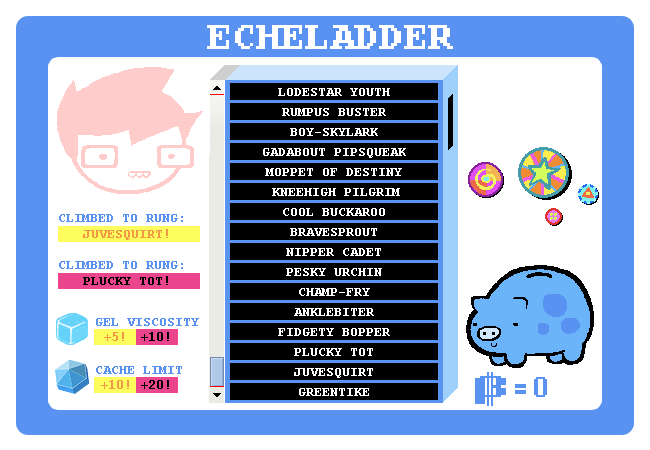
<style>
.page{position:relative;width:650px;height:450px;background:#ffffff}
.page>*{position:absolute;margin:0}
.t1{font:14px "CourierNewPS-BoldMT";color:#ffffff}
.t2{font:14px "CourierNewPS-BoldMT";color:#5992f0}
.t3{font:14px "CourierNewPS-BoldMT";color:#f19846}
.t4{font:14px "CourierNewPS-BoldMT";color:#000000}
</style>
<div class="page">
<p class="t1" style="left:278px;top:88px;width:112px;height:8px">LODESTAR YOUTH</p>
<p class="t1" style="left:282px;top:108px;width:104px;height:8px">RUMPUS BUSTER</p>
<p class="t1" style="left:290px;top:128px;width:88px;height:8px">BOY-SKYLARK</p>
<p class="t1" style="left:263px;top:148px;width:143px;height:10px">GADABOUT PIPSQUEAK</p>
<p class="t1" style="left:265px;top:168px;width:137px;height:8px">MOPPET OF DESTINY</p>
<p class="t1" style="left:272px;top:188px;width:128px;height:8px">KNEEHIGH PILGRIM</p>
<p class="t1" style="left:283px;top:208px;width:102px;height:8px">COOL BUCKAROO</p>
<p class="t2" style="left:59px;top:214px;width:124px;height:8px">CLIMBED TO RUNG:</p>
<p class="t3" style="left:83px;top:229px;width:85px;height:11px">JUVESQUIRT!</p>
<p class="t1" style="left:290px;top:228px;width:87px;height:8px">BRAVESPROUT</p>
<p class="t1" style="left:286px;top:248px;width:95px;height:8px">NIPPER CADET</p>
<p class="t2" style="left:59px;top:261px;width:124px;height:8px">CLIMBED TO RUNG:</p>
<p class="t1" style="left:286px;top:268px;width:96px;height:8px">PESKY URCHIN</p>
<p class="t4" style="left:83px;top:276px;width:85px;height:9px">PLUCKY TOT!</p>
<p class="t1" style="left:299px;top:288px;width:71px;height:8px">CHAMP-FRY</p>
<p class="t2" style="left:96px;top:318px;width:103px;height:8px">GEL VISCOSITY</p>
<p class="t1" style="left:294px;top:308px;width:80px;height:8px">ANKLEBITER</p>
<p class="t1" style="left:278px;top:328px;width:112px;height:8px">FIDGETY BOPPER</p>
<p class="t3" style="left:104px;top:332px;width:20px;height:9px">+5!</p>
<p class="t4" style="left:141px;top:332px;width:28px;height:9px">+10!</p>
<p class="t1" style="left:294px;top:348px;width:79px;height:8px">PLUCKY TOT</p>
<p class="t2" style="left:96px;top:366px;width:86px;height:8px">CACHE LIMIT</p>
<p class="t1" style="left:294px;top:368px;width:79px;height:10px">JUVESQUIRT</p>
<p class="t3" style="left:101px;top:380px;width:28px;height:9px">+10!</p>
<p class="t4" style="left:141px;top:380px;width:28px;height:9px">+20!</p>
<p class="t1" style="left:299px;top:388px;width:70px;height:8px">GREENTIKE</p>
</div>
